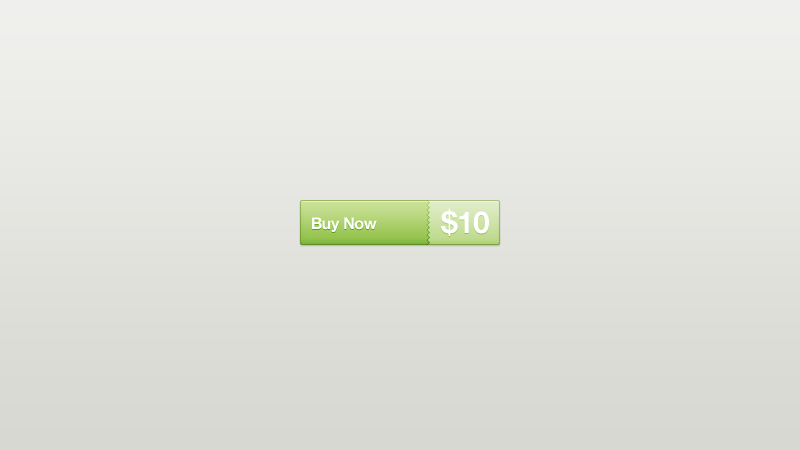
<style>
.page{position:relative;width:800px;height:450px}
.page>*{position:absolute;margin:0}
.t1{font:30px "HelveticaNeue-Bold";letter-spacing:-0.025em;color:#ffffff}
.t2{font:16px "HelveticaNeue-Bold";letter-spacing:-0.025em;color:#ffffff}
</style>
<div class="page">
<p class="t1" style="left:441px;top:208px;width:48px;height:28px">$10</p>
<p class="t2" style="left:312px;top:217px;width:65px;height:15px">Buy Now</p>
</div>
